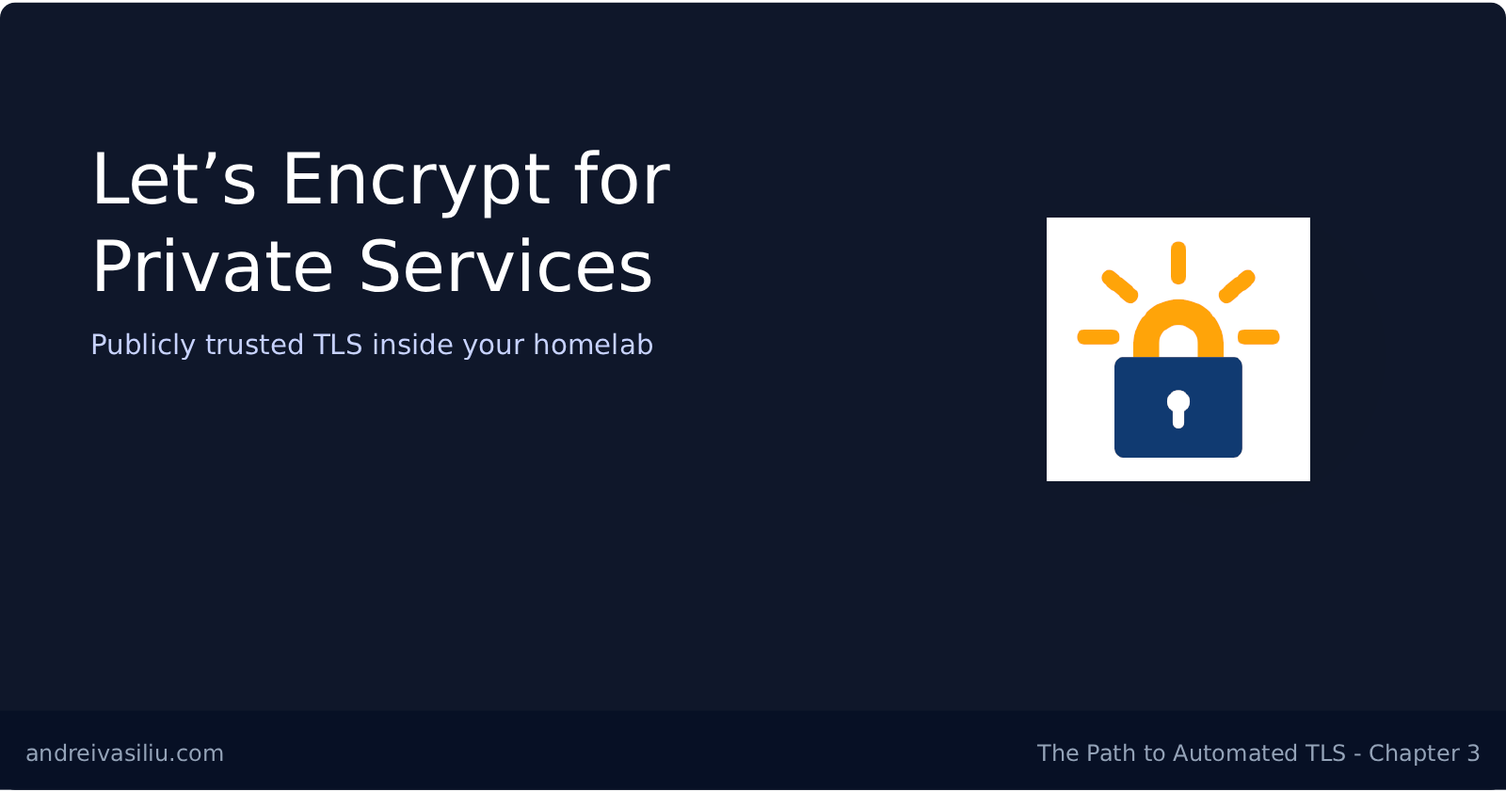
<style>
.page{position:relative;width:1506px;height:792px;background:#0f172a}
.page>*{position:absolute;margin:0}
.t1{font:70.3px "Arial";color:#ffffff}
.t2{font:27.6px "Arial";color:#c7d2fe}
.t3{font:22.6px "Arial";color:#94a3b8}
</style>
<div class="page">
<p class="t1" style="left:97px;top:150px;width:573px;height:68px">Let’s Encrypt for</p>
<p class="t1" style="left:97px;top:237px;width:554px;height:56px">Private Services</p>
<p class="t2" style="left:92px;top:332px;width:561px;height:29px">Publicly trusted TLS inside your homelab</p>
<p class="t3" style="left:26px;top:743px;width:197px;height:19px">andreivasiliu.com</p>
<p class="t3" style="left:1036px;top:743px;width:444px;height:22px">The Path to Automated TLS - Chapter 3</p>
</div>
